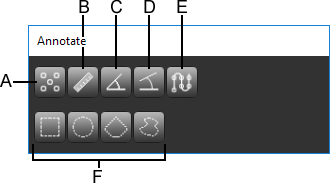
<style>
.page{position:relative;width:330px;height:183px;background:#ffffff}
.page>*{position:absolute;margin:0}
.t1{font:18px "ArialMT";color:#000000}
</style>
<div class="page">
<p class="t1" style="left:79px;top:0px;width:10px;height:13px">B</p>
<p class="t1" style="left:111px;top:0px;width:11px;height:14px">C</p>
<p class="t1" style="left:144px;top:0px;width:11px;height:13px">D</p>
<p class="t1" style="left:177px;top:0px;width:10px;height:13px">E</p>
<p class="t1" style="left:0px;top:74px;width:12px;height:13px">A</p>
<p class="t1" style="left:93px;top:170px;width:9px;height:13px">F</p>
</div>
